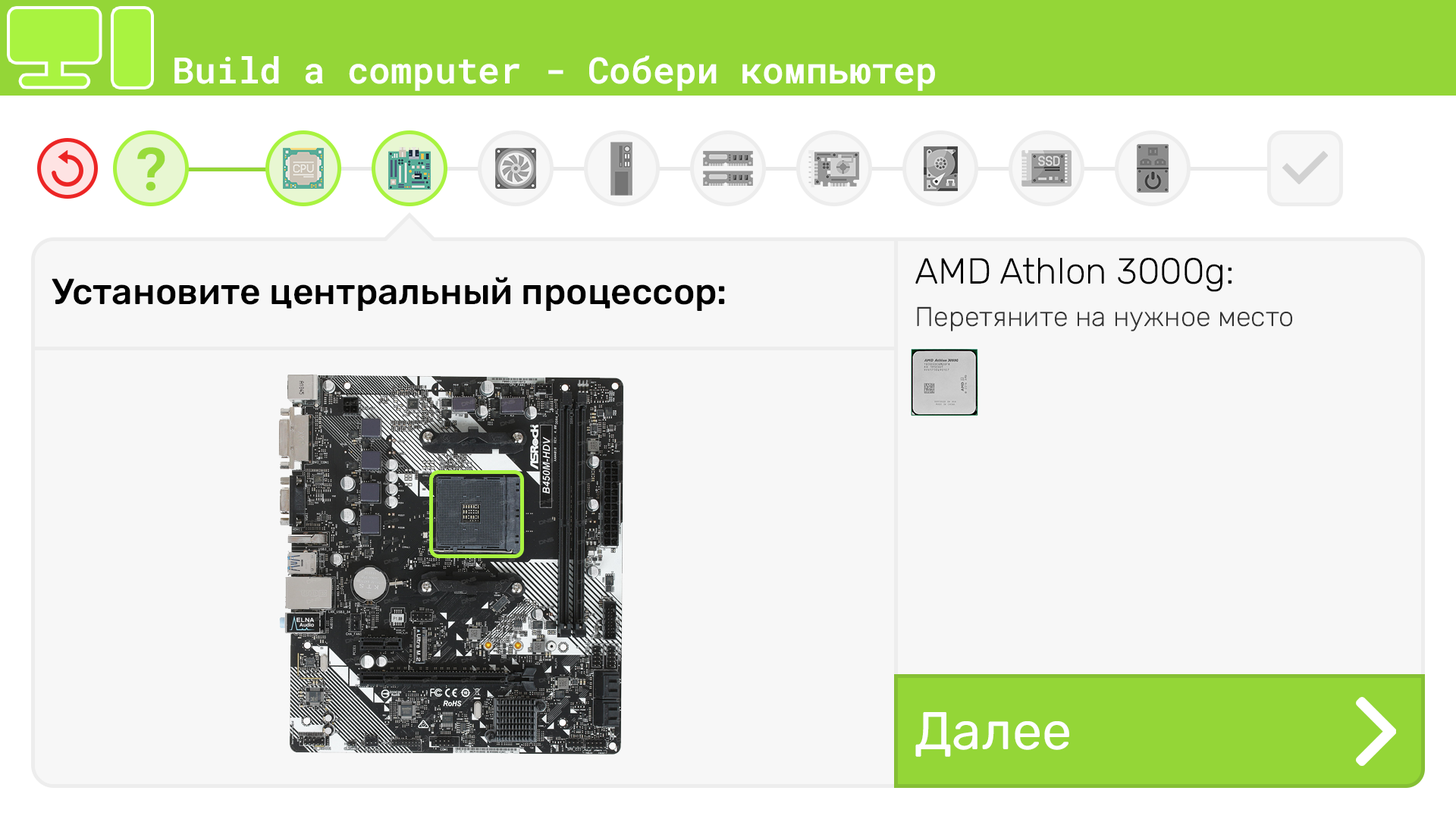
<style>
.page{position:relative;width:1456px;height:819px;background:#f7f7f7}
.page>*{position:absolute;margin:0}
.t1{font:36.4px "RobotoMono-SemiBold";color:#ffffff}
.t2{font:59.7px "RobotoMono-Bold";color:#98db3a}
.t3{font:36.4px "Rubik-Light";color:#000000}
.t4{font:36.4px "Rubik-Medium";color:#000000}
.t5{font:27.3px "Rubik-Light";color:#333333}
.t6{font:53.1px "Rubik-Regular";color:#fefefe}
</style>
<div class="page">
<p class="t1" style="left:174px;top:55px;width:761px;height:36px">Build a computer - Собери компьютер</p>
<p class="t2" style="left:137px;top:147px;width:28px;height:44px">?</p>
<p class="t3" style="left:915px;top:258px;width:317px;height:34px">AMD Athlon 3000g:</p>
<p class="t4" style="left:52px;top:277px;width:673px;height:34px">Установите центральный процессор:</p>
<p class="t5" style="left:917px;top:306px;width:375px;height:25px">Перетяните на нужное место</p>
<p class="t6" style="left:915px;top:712px;width:154px;height:45px">Далее</p>
</div>
